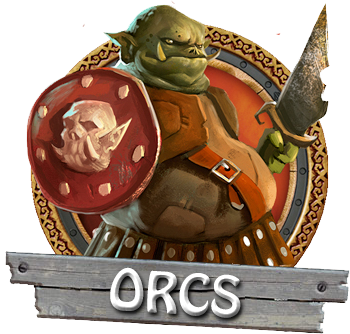
<style>
.page{position:relative;width:350px;height:334px;background:#ffffff}
.page>*{position:absolute;margin:0}
.t1{font:50px "HoboStd"}
</style>
<div class="page">
<p class="t1" style="left:110px;top:267px;width:131px;height:51px;rotate:4deg">ORCS</p>
</div>
